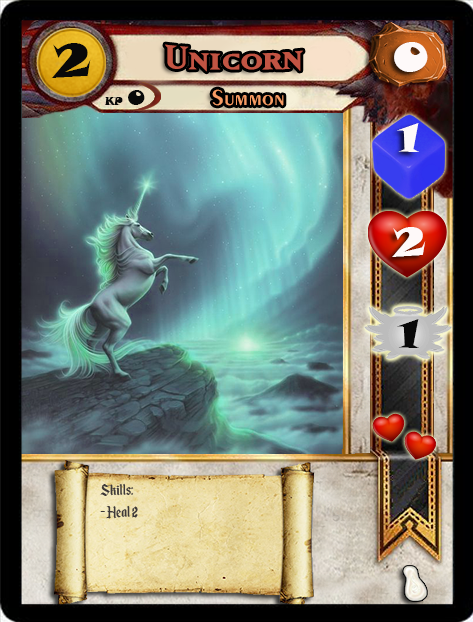
<style>
.page{position:relative;width:473px;height:622px}
.page>*{position:absolute;margin:0}
.t1{font:46.6px "SnapITC-Regular";color:#090909;scale:1.05 1}
.t2{font:40px "MatrixBoldSmallCaps";color:#c25443;scale:1.06 1}
.t3{font:40px "SnapITC-Regular";color:#fef9f9;scale:1.05 1}
.t4{font:22.7px "Exotic350BT-DemiBold";color:#f89c64;scale:1.06 1}
.t5{font:10.7px "SnapITC-Regular";color:#090909}
.t6{font:20.5px "SnapITC-Regular";color:#090909}
.t7{font:40px "SnapITC-Regular";color:#090909;scale:1.05 1}
.t8{font:18.7px "EnchantedLand";color:#3e3939}
</style>
<div class="page">
<p class="t1" style="left:51px;top:43px;width:40px;height:35px">2</p>
<p class="t2" style="left:165px;top:44px;width:138px;height:28px">Unicorn</p>
<p class="t3" style="left:394px;top:42px;width:34px;height:30px">0</p>
<p class="t4" style="left:212px;top:89px;width:72px;height:17px">Summon</p>
<p class="t5" style="left:104px;top:90px;width:41px;height:15px">KP <span class="t6">0</span></p>
<p class="t3" style="left:397px;top:123px;width:22px;height:29px">1</p>
<p class="t3" style="left:392px;top:227px;width:34px;height:30px">2</p>
<p class="t7" style="left:397px;top:319px;width:22px;height:29px">1</p>
<p class="t8" style="left:100px;top:483px;width:38px;height:36px">Skills:<br>- Heal 2</p>
</div>
